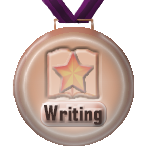
<style>
.page{position:relative;width:150px;height:150px;background:#ffffff}
.page>*{position:absolute;margin:0}
.t1{font:19.3px "AgencyFB-Bold";color:#3a2824;scale:1.23 1}
</style>
<div class="page">
<p class="t1" style="left:44px;top:105px;width:58px;height:20px">Writing</p>
</div>
